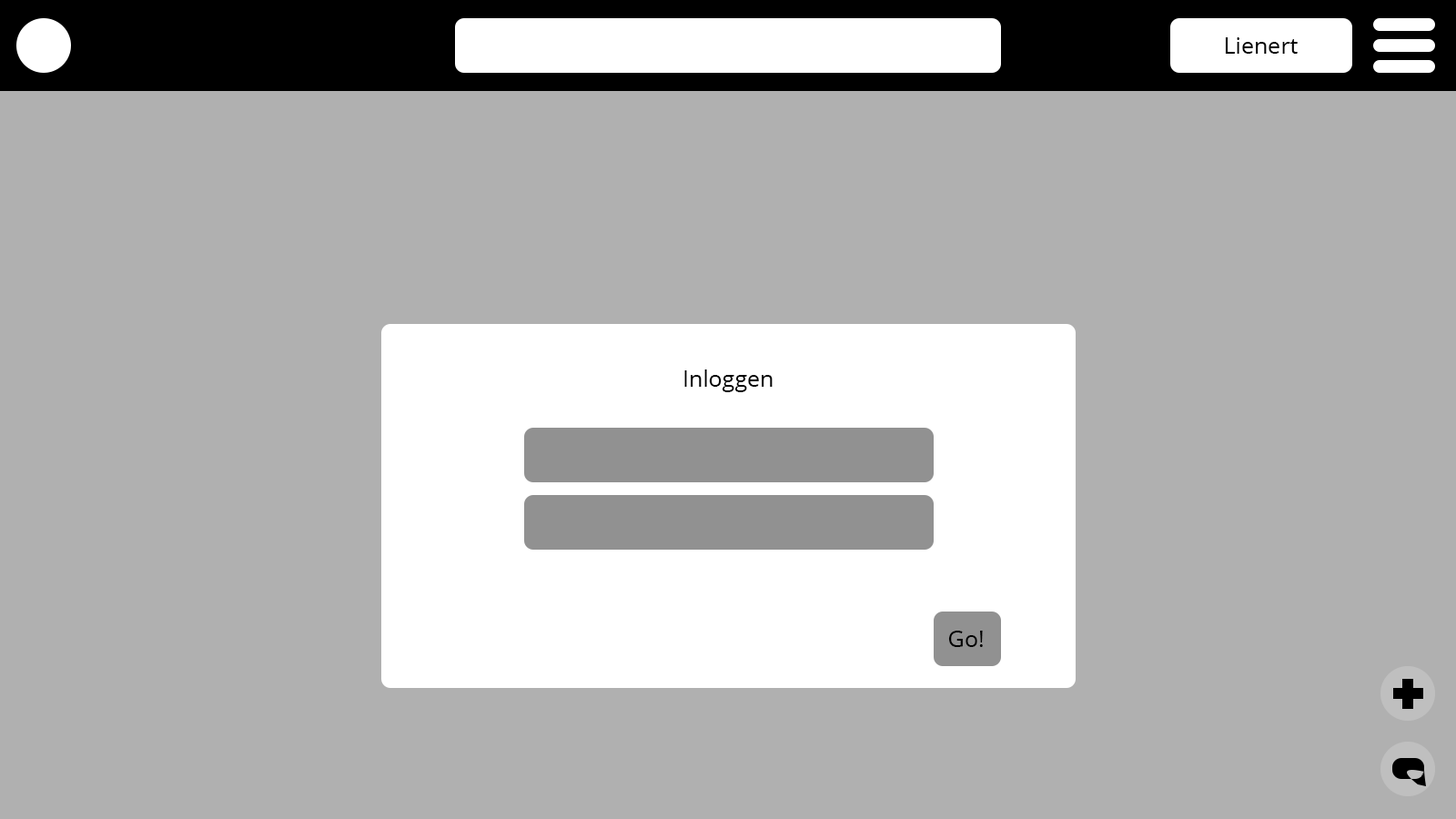
<style>
.page{position:relative;width:1456px;height:819px;background:#b0b0b0}
.page>*{position:absolute;margin:0}
.t1{font:22.7px "OpenSans";color:#000000}
</style>
<div class="page">
<p class="t1" style="left:684px;top:369px;width:89px;height:23px">Inloggen</p>
<p class="t1" style="left:948px;top:631px;width:35px;height:16px">Go!</p>
</div>
